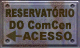
<style>
.page{position:relative;width:80px;height:48px}
.page>*{position:absolute;margin:0}
.t1{font:11px/12px "Arial-Black";color:#3e330c;font-weight:bold;scale:0.7 1}
.t2{font:11px/12px "Arial-Black";color:#3e330c;font-weight:bold;scale:0.73 1}
.t3{font:11px/12px "Arial-Black";color:#3e330c;font-weight:bold;scale:0.85 1}
.t4{font:11px "Arial-Black";color:#3e330c}
</style>
<div class="page">
<p class="t1" style="left:5px;top:6px;width:70px;height:24px;text-align:center"><span class="t2"> </span>RESERVATÓRIO<br><span class="t3"> DO ComCen</span></p>
<p class="t4" style="left:22px;top:31px;width:50px;height:10px">ACESSO</p>
</div>
